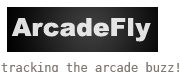
<style>
.page{position:relative;width:180px;height:72px;background:#ffffff}
.page>*{position:absolute;margin:0}
.t1{font:25px "Arial-Black";color:#efefef}
.t2{font:12px "BitstreamVeraSansMono-Roman";color:#817a75}
</style>
<div class="page">
<p class="t1" style="left:11px;top:18px;width:140px;height:24px">ArcadeFly</p>
<p class="t2" style="left:1px;top:62px;width:178px;height:10px">tracking the arcade buzz!</p>
</div>
